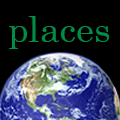
<style>
.page{position:relative;width:120px;height:120px;background:#000000}
.page>*{position:absolute;margin:0}
.t1{font:36px "CenturySchoolbook";color:#008e46}
</style>
<div class="page">
<p class="t1" style="left:9px;top:16px;width:101px;height:33px">places</p>
</div>
